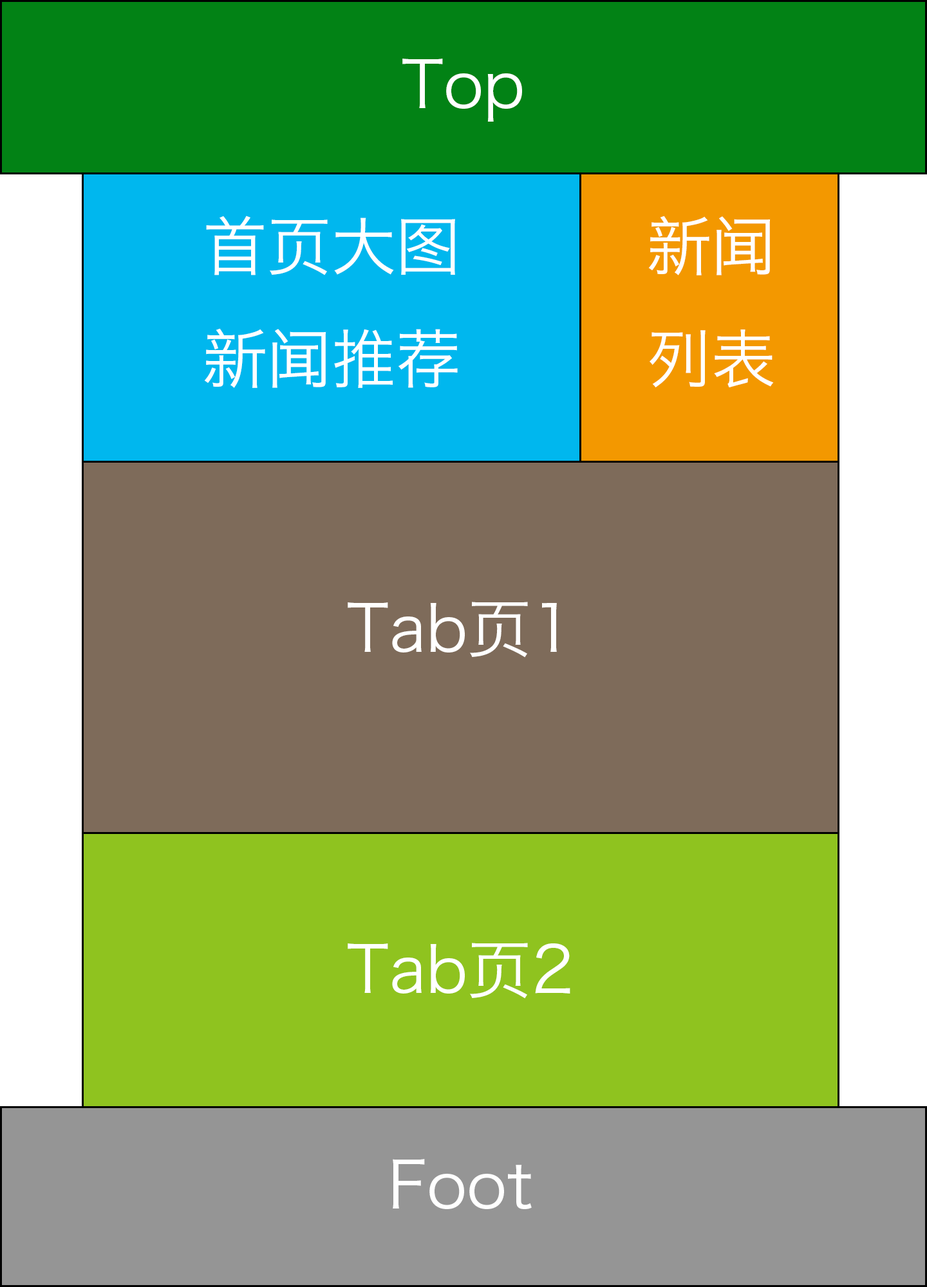
<style>
.page{position:relative;width:927px;height:1287px;background:#7e6b5a}
.page>*{position:absolute;margin:0}
.t1{font:64.3px "HiraginoSansGB-W3";color:#ffffff}
</style>
<div class="page">
<p class="t1" style="left:402px;top:59px;width:120px;height:63px">Top</p>
<p class="t1" style="left:204px;top:216px;width:253px;height:172px;text-align:center">首页大图<br>新闻推荐</p>
<p class="t1" style="left:648px;top:216px;width:125px;height:171px;text-align:center">新闻<br>列表</p>
<p class="t1" style="left:347px;top:602px;width:210px;height:56px">Tab页1</p>
<p class="t1" style="left:347px;top:943px;width:223px;height:56px">Tab页2</p>
<p class="t1" style="left:393px;top:1159px;width:138px;height:50px">Foot</p>
</div>
